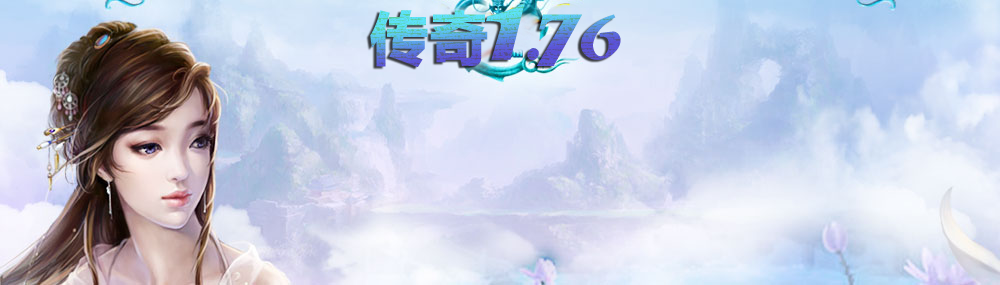
<style>
.page{position:relative;width:1000px;height:285px}
.page>*{position:absolute;margin:0}
.t1{font:60px "FZLTTHJW--GB1-0"}
.t2{font:100px "Splash"}
.t3{font:70px "Splash"}
.t4{font:80px "Splash"}
</style>
<div class="page">
<p class="t1" style="left:370px;top:3px;width:251px;height:64px">传奇<span class="t2">1</span><span class="t3">.</span><span class="t4">7</span><span class="t3">6</span></p>
</div>
